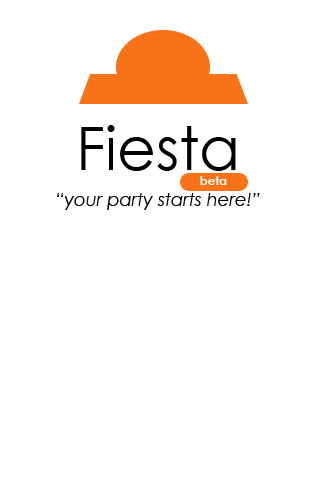
<style>
.page{position:relative;width:320px;height:480px;background:#ffffff}
.page>*{position:absolute;margin:0}
.t1{font:18px "CenturyGothic-Italic";color:#000000}
.t2{font:60px "CenturyGothic";color:#000000}
.t3{font:12px "CenturyGothic-Bold";color:#ffffff}
</style>
<div class="page">
<p class="t1" style="left:57px;top:125px;width:203px;height:85px;text-align:center"><span class="t2">Fiesta<br>                                           </span><span class="t3"> beta<br></span>“your party starts here!”</p>
</div>
